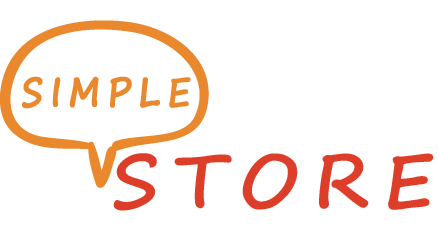
<style>
.page{position:relative;width:438px;height:229px;background:#ffffff}
.page>*{position:absolute;margin:0}
.t1{font:40.4px "SegoePrint-Bold";letter-spacing:0.2em;color:#ea882d;text-transform:uppercase;font-weight:bold;scale:0.83 1}
.t2{font:75px "SegoePrint-Bold";letter-spacing:0.2em;color:#dc3e2a;text-transform:uppercase}
</style>
<div class="page">
<p class="t1" style="left:22px;top:76px;width:169px;height:33px">simple</p>
<p class="t2" style="left:113px;top:153px;width:321px;height:58px">Store</p>
</div>
